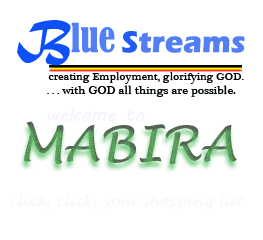
<style>
.page{position:relative;width:263px;height:240px;background:#ffffff}
.page>*{position:absolute;margin:0}
.t1{font:31px "ErasITC-Bold";color:#5280f4}
.t2{font:49.6px "MaturaMTScriptCapitals";color:#0e50f7}
.t3{font:37.2px "BernardMT-Condensed";color:#5280f4}
.t4{font:31px "ErasITC-Bold";color:#215df5}
.t5{font:11.4px "PlantagenetCherokee";color:#000507}
.t6{font:12px "PlantagenetCherokee";color:#000507}
.t7{font:11px "PlantagenetCherokee";color:#000507}
.t8{font:18.6px "MVBoli";color:#f6f4fb}
.t9{font:48px "LucidaHandwriting-Italic"}
.t10{font:14px "LucidaHandwriting-Italic";color:#faf7fb}
</style>
<div class="page">
<p class="t1" style="left:17px;top:20px;width:228px;height:46px"><span class="t2">B</span><span class="t3">lue </span><span class="t4">S</span>treams</p>
<p class="t5" style="left:48px;top:72px;width:196px;height:12px">creating Employment, glorifying GOD.</p>
<p class="t6" style="left:47px;top:85px;width:189px;height:12px"><span class="t7">. . . </span>with GOD all things are possible.</p>
<p class="t8" style="left:47px;top:107px;width:98px;height:15px">welcome to</p>
<p class="t9" style="left:24px;top:121px;width:213px;height:44px">MABIRA</p>
<p class="t10" style="left:10px;top:194px;width:236px;height:17px">click, click, your shopping list</p>
</div>
